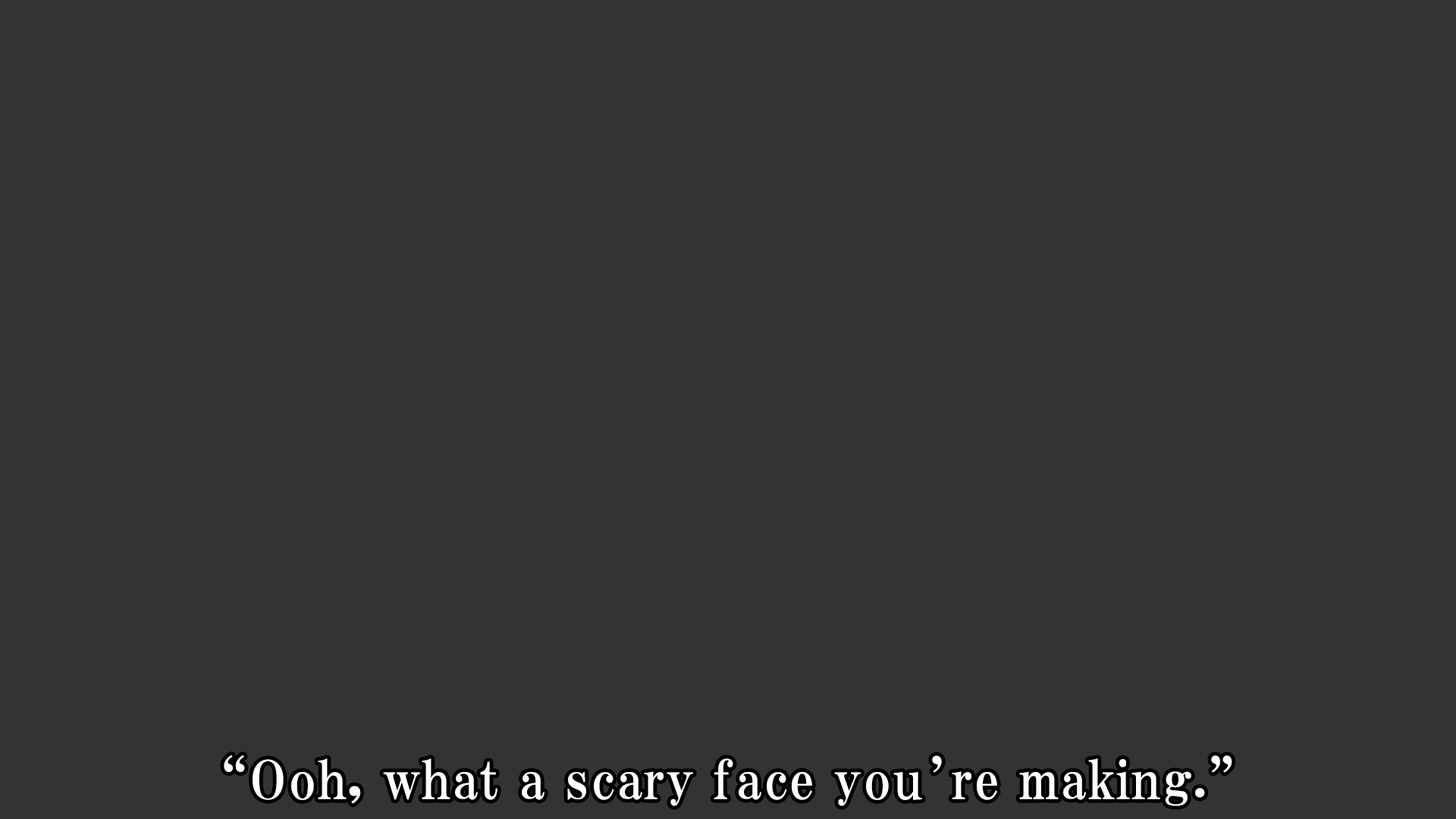
<style>
.page{position:relative;width:1456px;height:819px;background:#333333}
.page>*{position:absolute;margin:0}
.t1{font:53.1px "HGPMinchoE";letter-spacing:0.025em;color:#ffffff}
</style>
<div class="page">
<p class="t1" style="left:224px;top:755px;width:1008px;height:51px">“Ooh, what a scary face you’re making.”</p>
</div>
